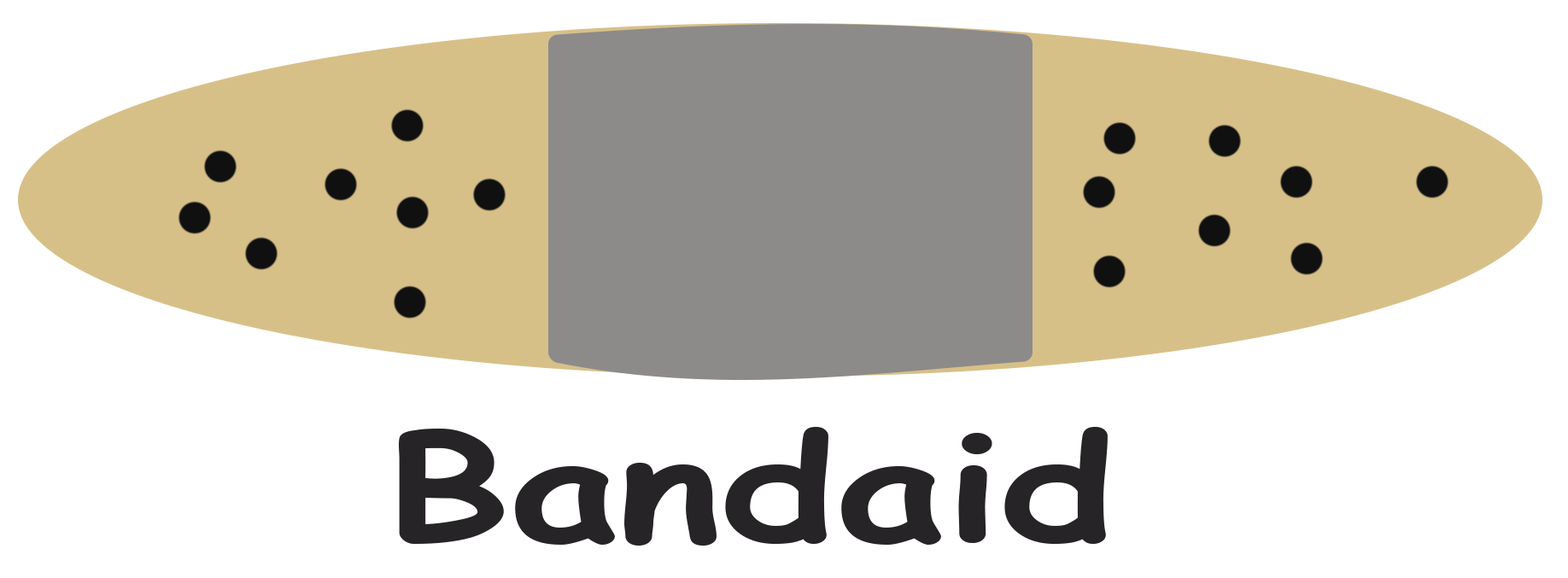
<style>
.page{position:relative;width:1568px;height:578px;background:#ffffff}
.page>*{position:absolute;margin:0}
.t1{font:146.2px "ComicSansMS-Bold";color:#262426;scale:1.34 1}
</style>
<div class="page">
<p class="t1" style="left:398px;top:427px;width:710px;height:119px">Bandaid</p>
</div>
